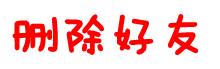
<style>
.page{position:relative;width:220px;height:69px;background:#ffffff}
.page>*{position:absolute;margin:0}
.t1{font:48px "FZMWJW--GB1-0";color:#ff0000;font-weight:bold}
</style>
<div class="page">
<p class="t1" style="left:12px;top:14px;width:187px;height:42px">删除好友</p>
</div>
